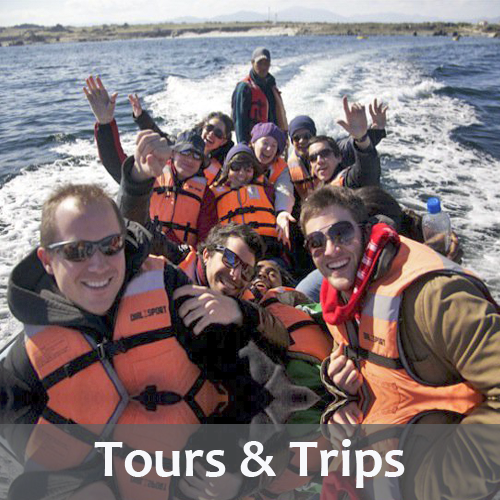
<style>
.page{position:relative;width:500px;height:500px}
.page>*{position:absolute;margin:0}
.t1{font:53.3px "Candara-Bold";color:#f7f8fb;scale:1.03 1}
</style>
<div class="page">
<p class="t1" style="left:94px;top:439px;width:311px;height:49px">Tours &amp; Trips</p>
</div>
